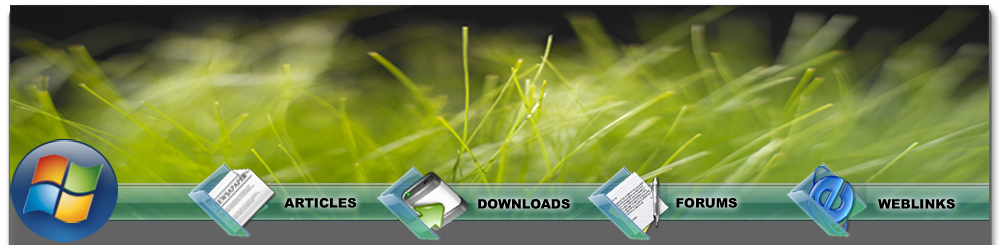
<style>
.page{position:relative;width:1000px;height:245px}
.page>*{position:absolute;margin:0}
.t1{font:13px "Arial-Black";color:#010000}
</style>
<div class="page">
<p class="t1" style="left:284px;top:198px;width:73px;height:10px">ARTICLES</p>
<p class="t1" style="left:676px;top:198px;width:61px;height:10px">FORUMS</p>
<p class="t1" style="left:478px;top:199px;width:92px;height:10px">DOWNLOADS</p>
<p class="t1" style="left:878px;top:199px;width:77px;height:10px">WEBLINKS</p>
</div>
